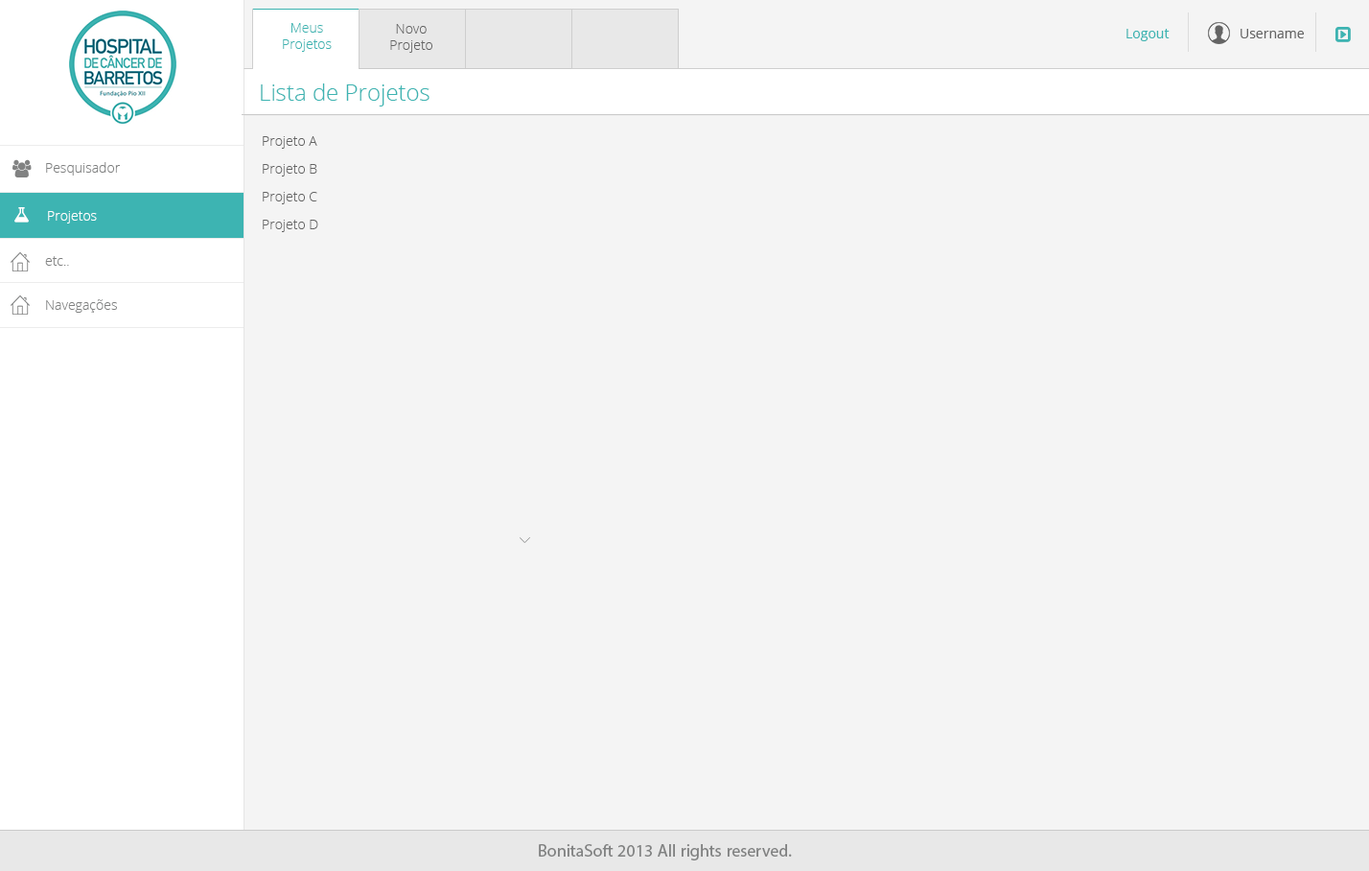
<style>
.page{position:relative;width:1369px;height:871px;background:#f4f4f4}
.page>*{position:absolute;margin:0}
.t1{font:13.4px "OpenSans-Light";color:#3db4b2}
.t2{font:13.4px "OpenSans-Light";color:#646464}
.t3{font:13.4px "OpenSans";color:#3db4b2}
.t4{font:13.4px "OpenSans";color:#646464}
.t5{font:23px "OpenSans-Light";color:#3db4b2}
.t6{font:13.4px "OpenSans-Light";color:#818282}
.t7{font:13.4px "OpenSans-Light";color:#ffffff}
.t8{font:17.3px "MyriadPro-Regular";color:#818282}
</style>
<div class="page">
<p class="t1" style="left:283px;top:23px;width:49px;height:29px;text-align:center">Meus<br>Projetos</p>
<p class="t2" style="left:390px;top:24px;width:43px;height:29px;text-align:center">Novo<br>Projeto</p>
<p class="t3" style="left:1127px;top:29px;width:43px;height:12px">Logout</p>
<p class="t4" style="left:1241px;top:29px;width:63px;height:9px">Username</p>
<p class="t5" style="left:261px;top:83px;width:169px;height:23px">Lista de Projetos</p>
<p class="t2" style="left:263px;top:136px;width:54px;height:13px">Projeto A</p>
<p class="t6" style="left:46px;top:162px;width:74px;height:13px">Pesquisador</p>
<p class="t2" style="left:263px;top:164px;width:54px;height:12px">Projeto B</p>
<p class="t2" style="left:263px;top:192px;width:54px;height:12px">Projeto C</p>
<p class="t7" style="left:48px;top:211px;width:49px;height:12px">Projetos</p>
<p class="t2" style="left:263px;top:220px;width:55px;height:12px">Projeto D</p>
<p class="t6" style="left:45px;top:256px;width:24px;height:10px">etc..</p>
<p class="t6" style="left:46px;top:299px;width:71px;height:14px">Navegações</p>
<p class="t8" style="left:539px;top:844px;width:253px;height:16px">BonitaSoft 2013 All rights reserved.</p>
</div>
